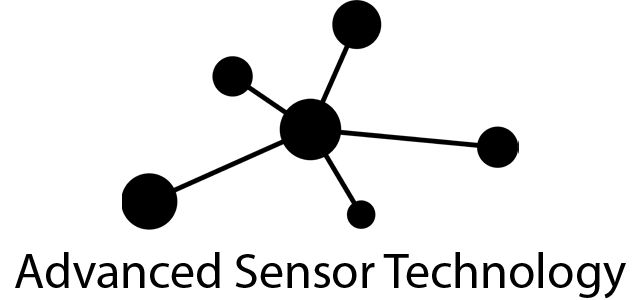
<style>
.page{position:relative;width:640px;height:300px;background:#ffffff}
.page>*{position:absolute;margin:0}
.t1{font:50px "MyriadPro-Regular";color:#000000}
</style>
<div class="page">
<p class="t1" style="left:15px;top:252px;width:611px;height:47px">Advanced Sensor Technology</p>
</div>
